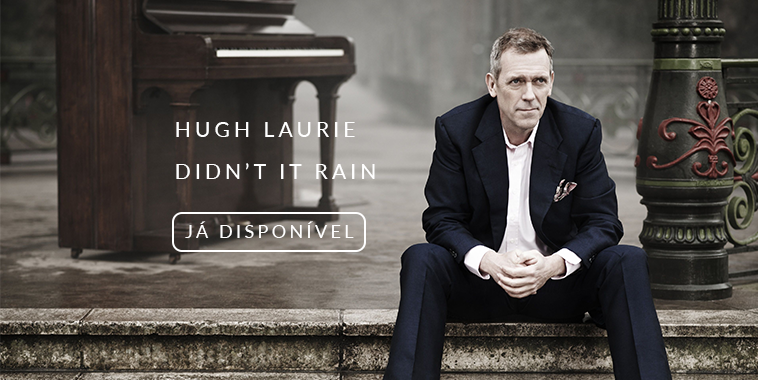
<style>
.page{position:relative;width:758px;height:380px}
.page>*{position:absolute;margin:0}
.t1{font:20.9px/41.8px "Lato-Regular";letter-spacing:0.2em;color:#ffffff;text-transform:uppercase}
.t2{font:17.7px "Lato-Regular";letter-spacing:0.2em;color:#ffffff;text-transform:uppercase}
</style>
<div class="page">
<p class="t1" style="left:176px;top:122px;width:199px;height:57px">Hugh laurie<br>didn’t it rain</p>
<p class="t2" style="left:185px;top:221px;width:169px;height:17px">Já disponível</p>
</div>
